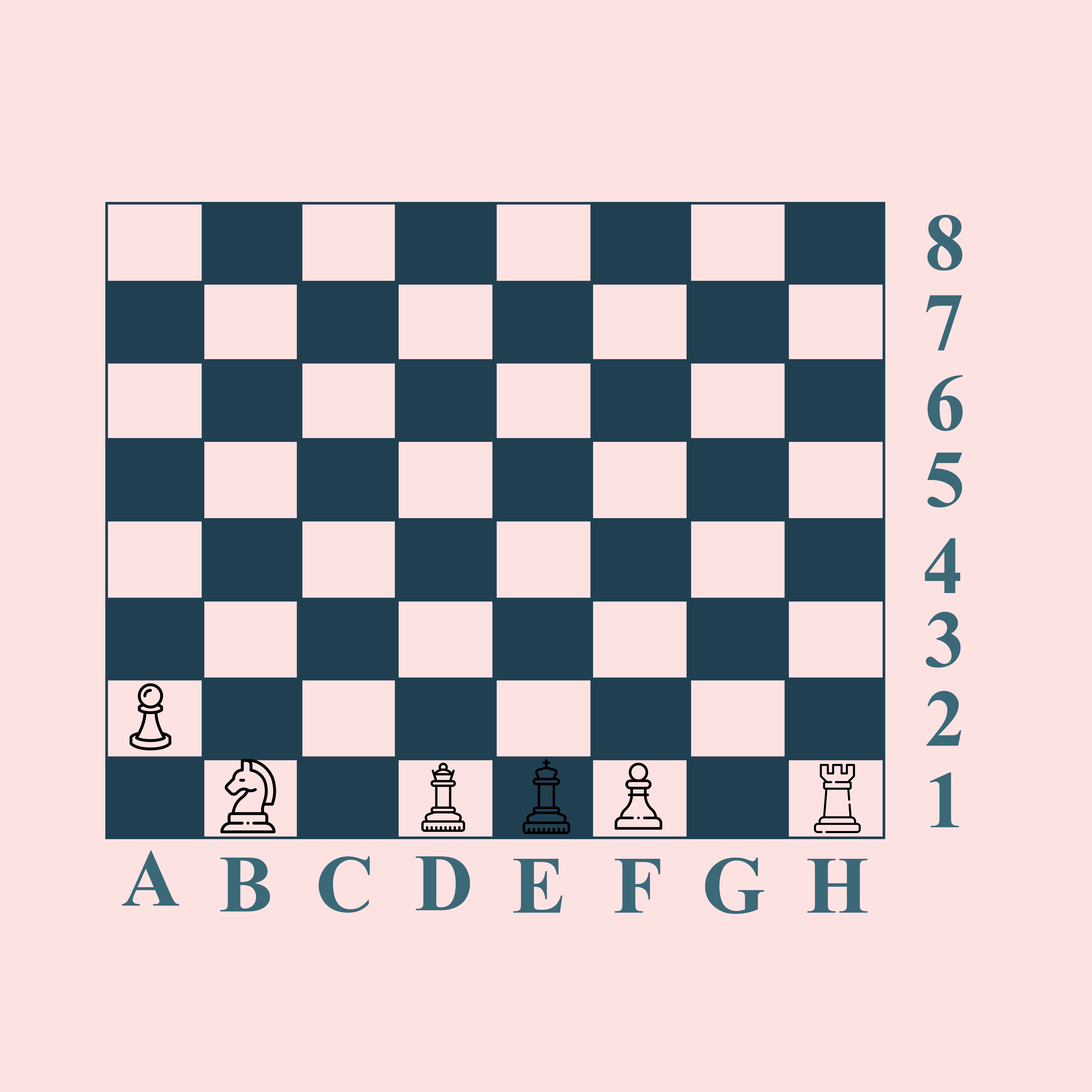
<style>
.page{position:relative;width:1092px;height:1092px;background:#fde2e2}
.page>*{position:absolute;margin:0}
.t1{font:81.3px "TimesNewRomanPS-BoldMT";letter-spacing:-0.04em;color:#3b6978}
</style>
<div class="page">
<p class="t1" style="left:927px;top:215px;width:35px;height:56px">8</p>
<p class="t1" style="left:926px;top:295px;width:36px;height:55px">7</p>
<p class="t1" style="left:927px;top:375px;width:36px;height:56px">6</p>
<p class="t1" style="left:927px;top:453px;width:35px;height:54px">5</p>
<p class="t1" style="left:925px;top:538px;width:35px;height:55px">4</p>
<p class="t1" style="left:926px;top:612px;width:35px;height:56px">3</p>
<p class="t1" style="left:926px;top:691px;width:35px;height:55px">2</p>
<p class="t1" style="left:930px;top:772px;width:29px;height:55px">1</p>
<p class="t1" style="left:122px;top:851px;width:57px;height:55px">A</p>
<p class="t1" style="left:220px;top:858px;width:50px;height:53px">B</p>
<p class="t1" style="left:319px;top:856px;width:51px;height:57px">C</p>
<p class="t1" style="left:416px;top:856px;width:54px;height:54px">D</p>
<p class="t1" style="left:705px;top:858px;width:59px;height:56px">G</p>
<p class="t1" style="left:513px;top:859px;width:49px;height:54px">E</p>
<p class="t1" style="left:615px;top:859px;width:45px;height:54px">F</p>
<p class="t1" style="left:807px;top:859px;width:61px;height:54px">H</p>
</div>
